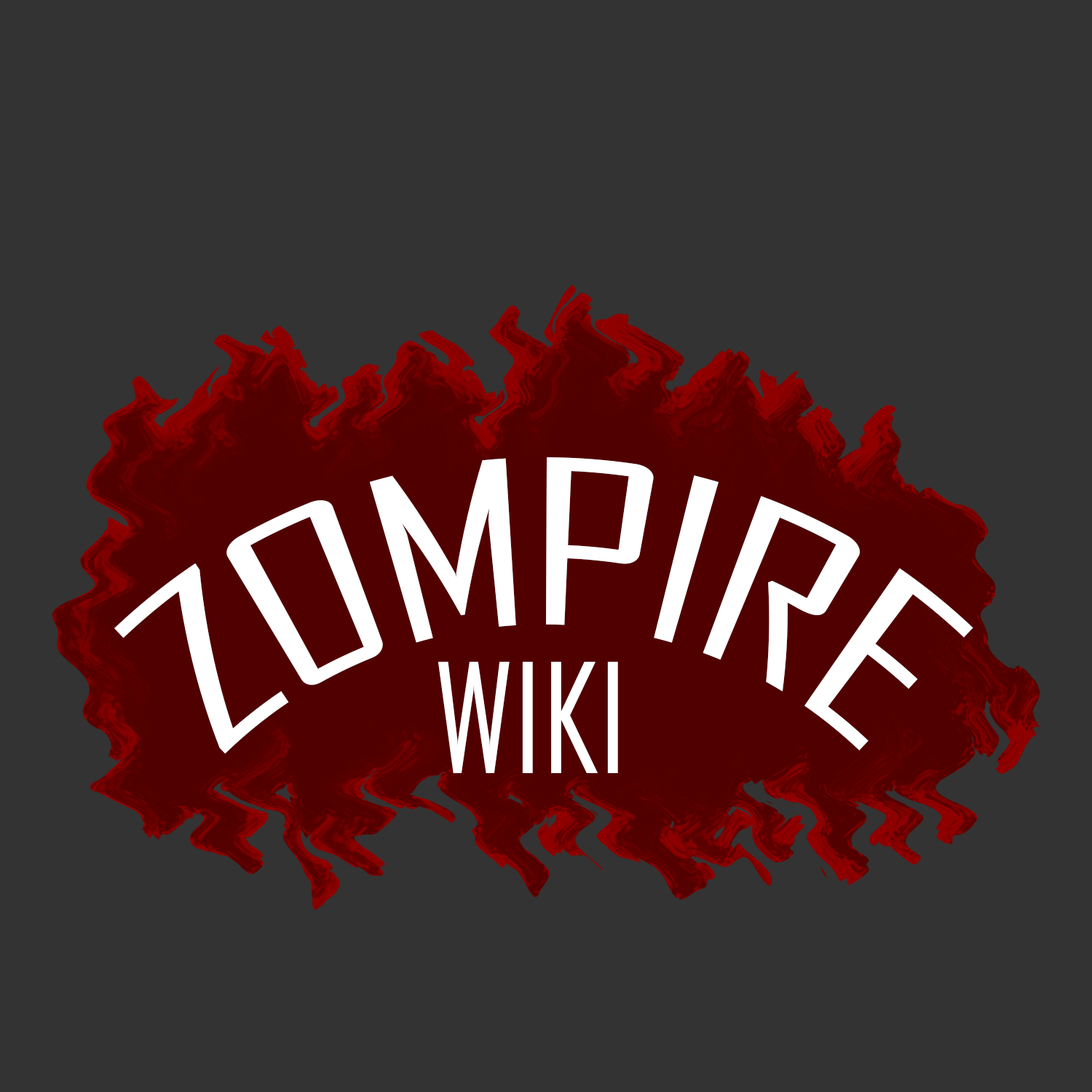
<style>
.page{position:relative;width:1092px;height:1092px;background:#333333}
.page>*{position:absolute;margin:0}
.t1{font:218.4px "AgencyFB-Reg";color:#ffffff}
.t2{font:145.6px "AgencyFB-Reg";color:#ffffff}
</style>
<div class="page">
<p class="t1" style="left:114px;top:457px;width:859px;height:297px">ZOMPIRE</p>
<p class="t2" style="left:438px;top:662px;width:180px;height:111px">WIKI</p>
</div>
